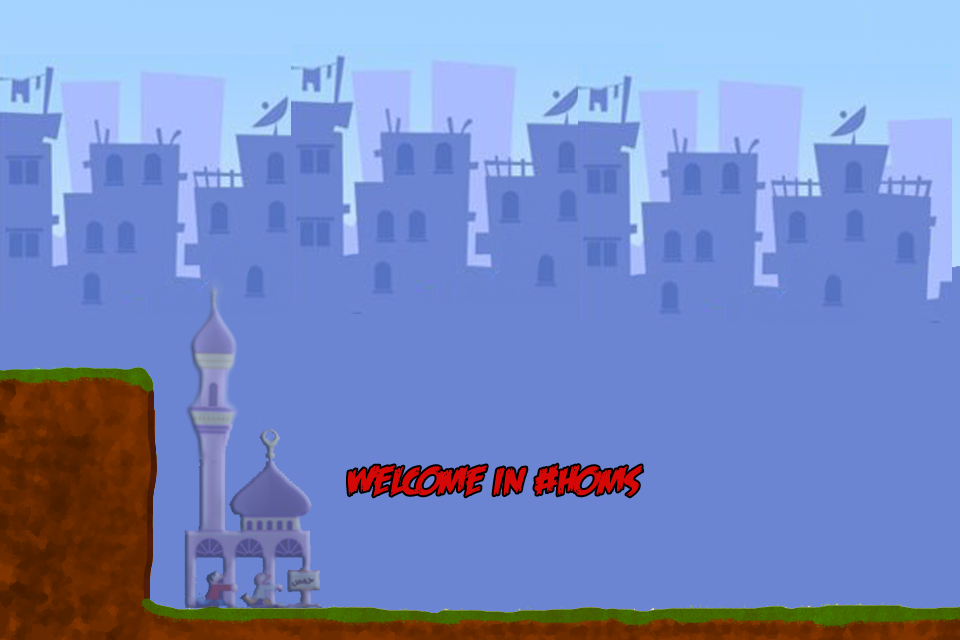
<style>
.page{position:relative;width:960px;height:640px;background:#6b85d2}
.page>*{position:absolute;margin:0}
.t1{font:40px "FeastofFleshBBItalic";color:#d50808}
</style>
<div class="page">
<p class="t1" style="left:348px;top:464px;width:295px;height:33px">Welcome in #Homs</p>
</div>
